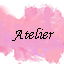
<style>
.page{position:relative;width:64px;height:64px}
.page>*{position:absolute;margin:0}
.t1{font:16px "MonotypeCorsiva";color:#000000}
</style>
<div class="page">
<p class="t1" style="left:12px;top:28px;width:42px;height:13px">Atelier</p>
</div>
